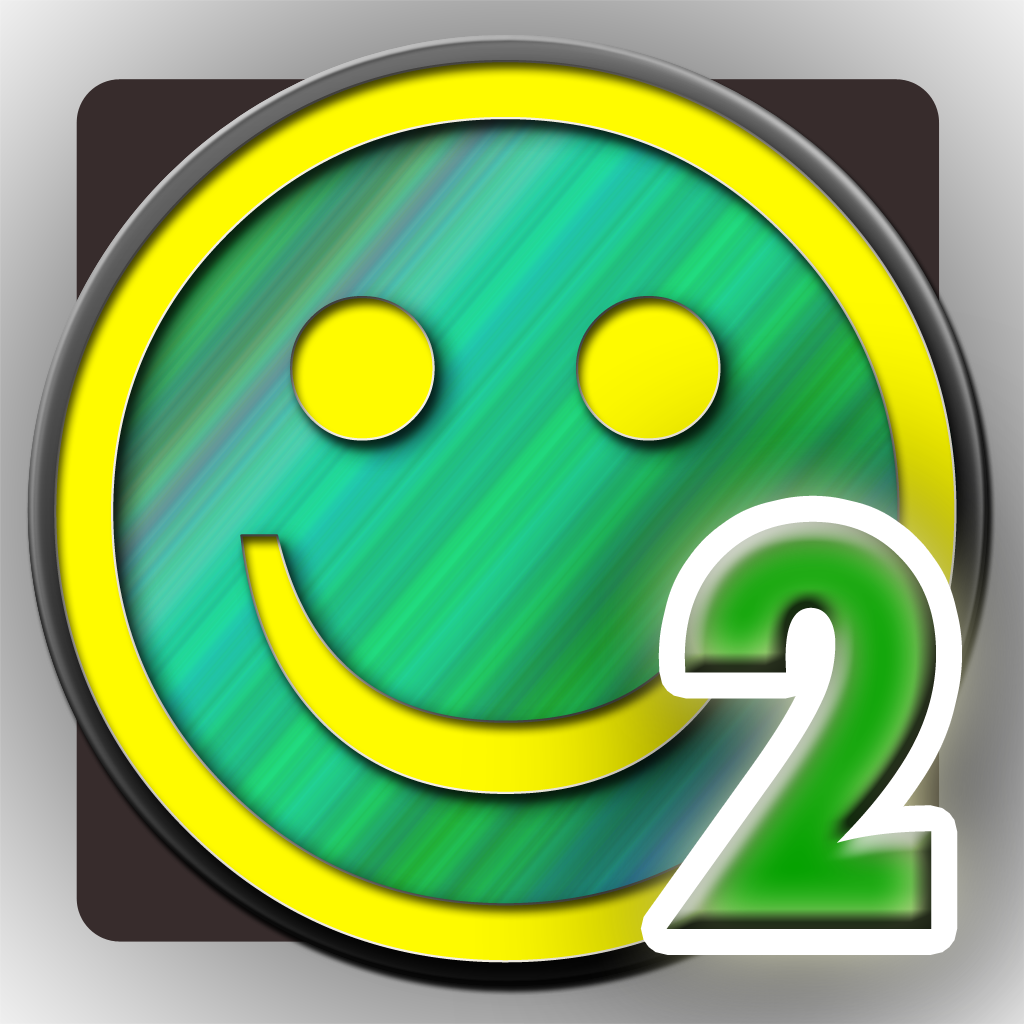
<style>
.page{position:relative;width:1024px;height:1024px}
.page>*{position:absolute;margin:0}
.t1{font:540px "Futura-CondensedExtraBold";scale:0.95 1}
</style>
<div class="page">
<p class="t1" style="left:666px;top:521px;width:270px;height:408px">2</p>
</div>
